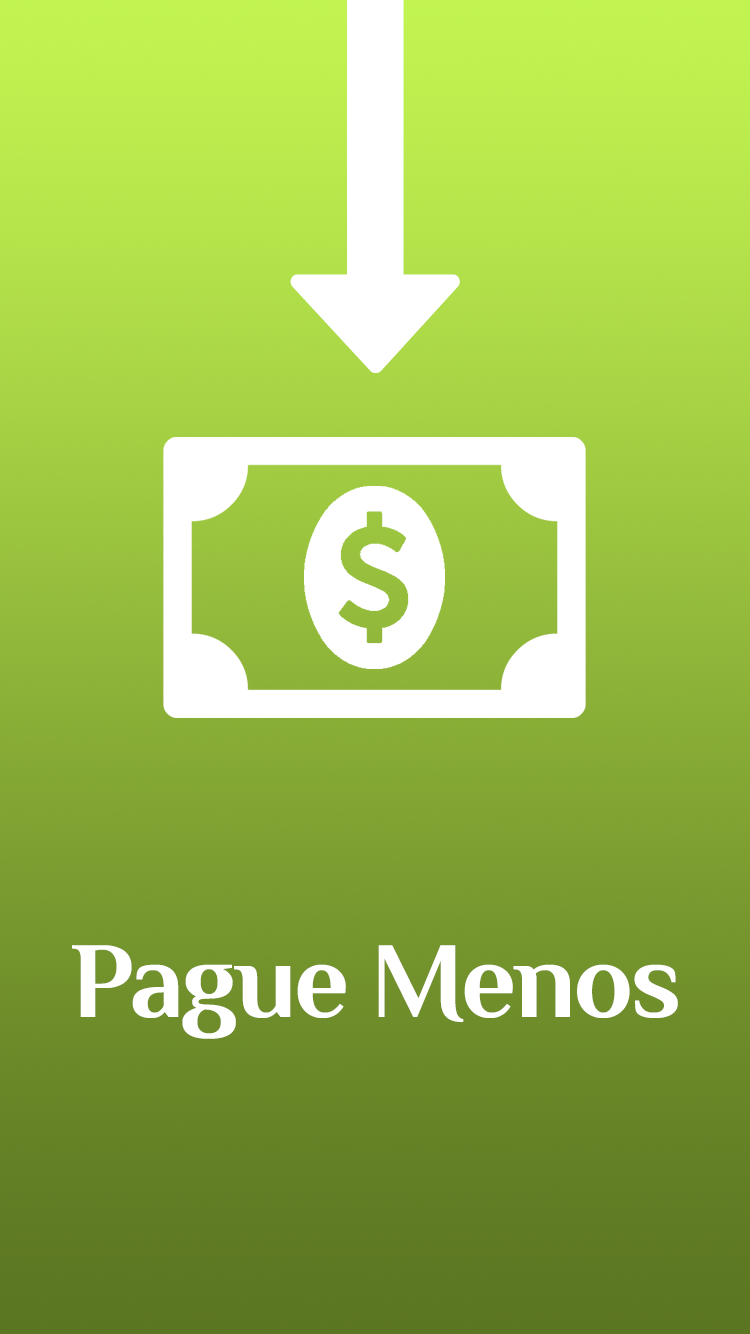
<style>
.page{position:relative;width:750px;height:1334px}
.page>*{position:absolute;margin:0}
.t1{font:108.7px "Philosopher-Bold";letter-spacing:-0.025em;color:#ffffff}
</style>
<div class="page">
<p class="t1" style="left:72px;top:945px;width:606px;height:94px">Pague Menos</p>
</div>
